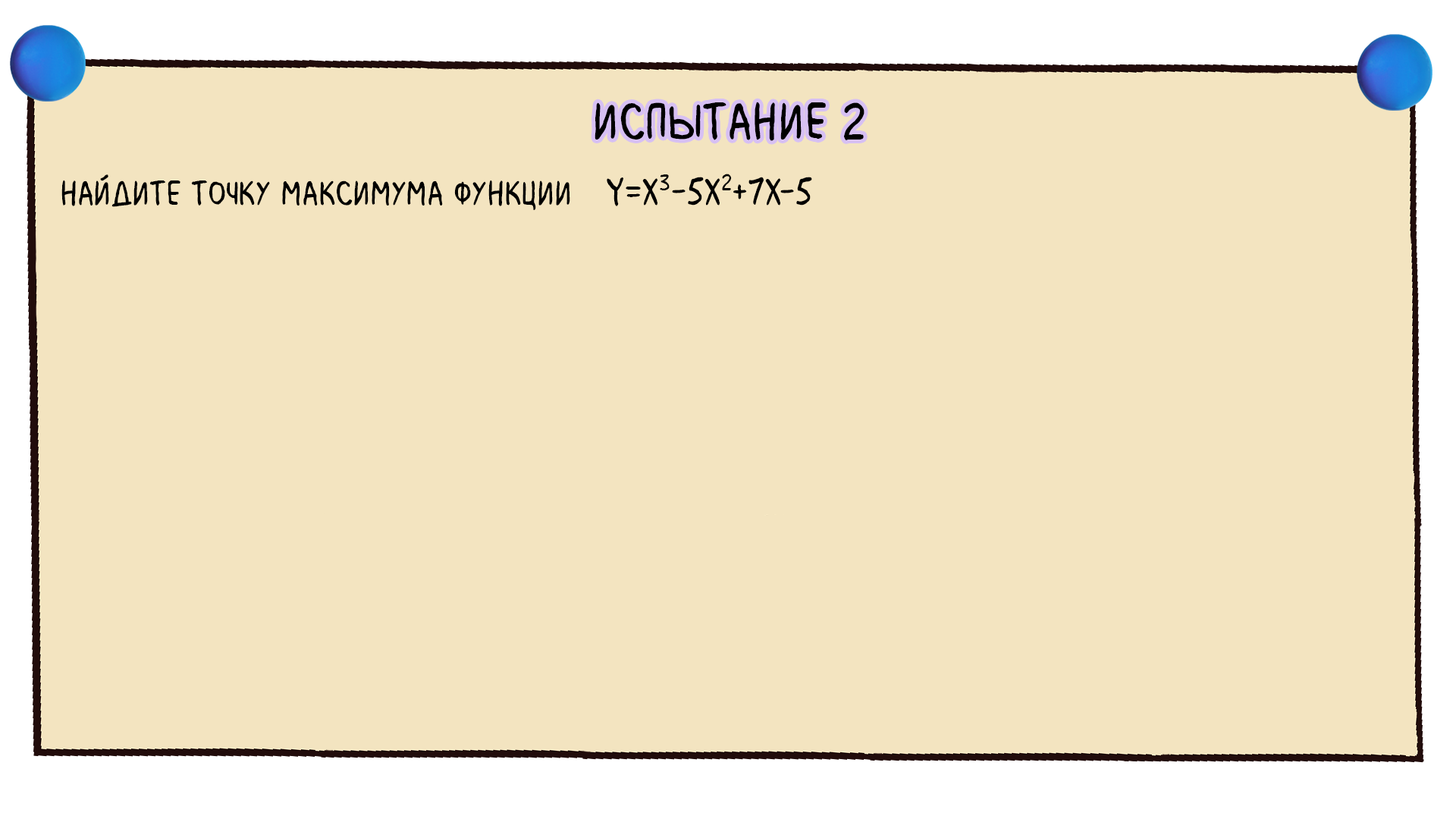
<style>
.page{position:relative;width:1456px;height:819px;background:#f3e4c0}
.page>*{position:absolute;margin:0}
.t1{font:54.6px "MilkMustacheBB";color:#000000}
.t2{font:36.4px "MilkMustacheBB";color:#000000}
.t3{font:41.7px "MilkMustacheBB";color:#000000}
</style>
<div class="page">
<p class="t1" style="left:595px;top:102px;width:269px;height:39px">испытание 2</p>
<p class="t2" style="left:61px;top:174px;width:751px;height:36px">Найдите точку максимума функции  <span class="t3">y=x3-5x2+7x-5</span></p>
</div>
